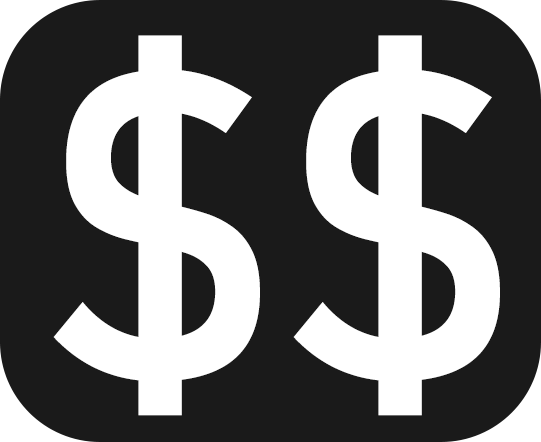
<style>
.page{position:relative;width:541px;height:442px;background:#1a1a1a}
.page>*{position:absolute;margin:0}
.t1{font:429.9px "Bahnschrift";color:#ffffff}
</style>
<div class="page">
<p class="t1" style="left:53px;top:35px;width:447px;height:381px">$$</p>
</div>
